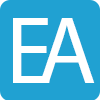
<style>
.page{position:relative;width:100px;height:100px;background:#20a1d2}
.page>*{position:absolute;margin:0}
.t1{font:96px "MyriadPro-Regular";color:#ffffff}
</style>
<div class="page">
<p class="t1" style="left:13px;top:18px;width:37px;height:65px">E</p>
<p class="t1" style="left:40px;top:18px;width:55px;height:65px">A</p>
</div>
